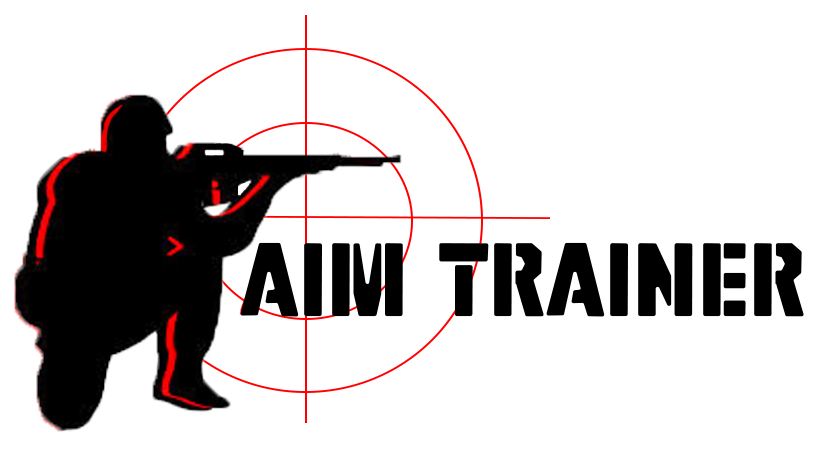
<style>
.page{position:relative;width:824px;height:452px;background:#ffffff}
.page>*{position:absolute;margin:0}
.t1{font:104.2px "SGTJhonORegular";color:#000000}
</style>
<div class="page">
<p class="t1" style="left:240px;top:242px;width:564px;height:75px">Aim trainer</p>
</div>
